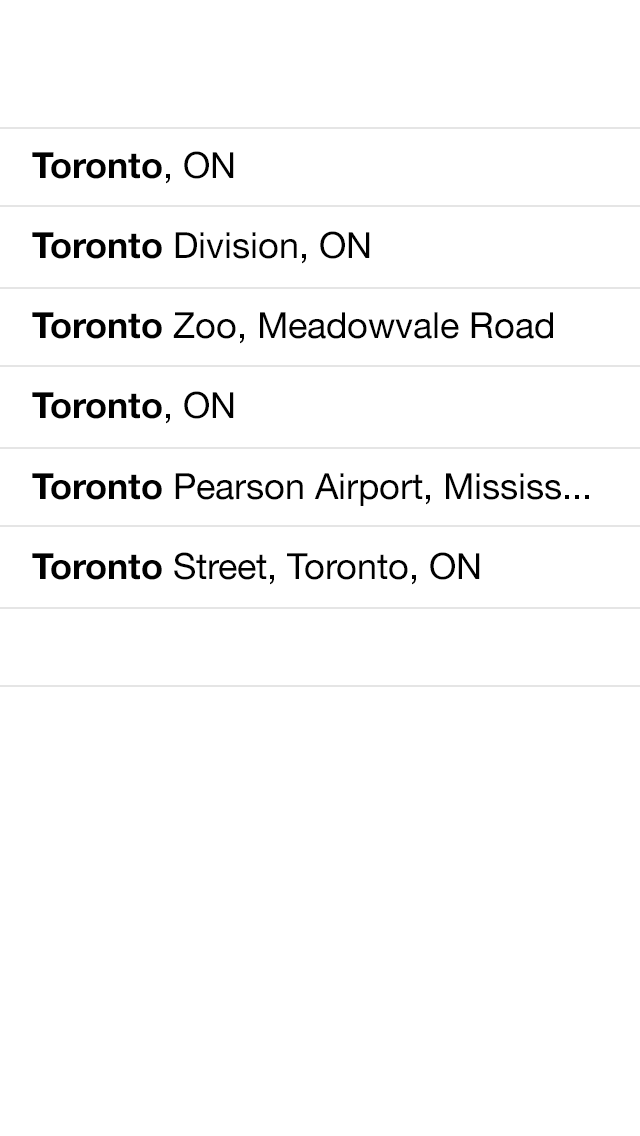
<style>
.page{position:relative;width:640px;height:1136px;background:#ffffff}
.page>*{position:absolute;margin:0}
.t1{font:36px "HelveticaNeue";color:#000000}
.t2{font:36px "HelveticaNeue-Bold";color:#000000}
</style>
<div class="page">
<p class="t1" style="left:32px;top:151px;width:557px;height:434px"><span class="t2">Toronto</span>, ON<br><span class="t2">Toronto </span>Division, ON<br><span class="t2">Toronto </span>Zoo, Meadowvale Road<br><span class="t2">Toronto</span>, ON<br><span class="t2">Toronto </span>Pearson Airport, Mississ...<br><span class="t2">Toronto </span>Street, Toronto, ON</p>
</div>
